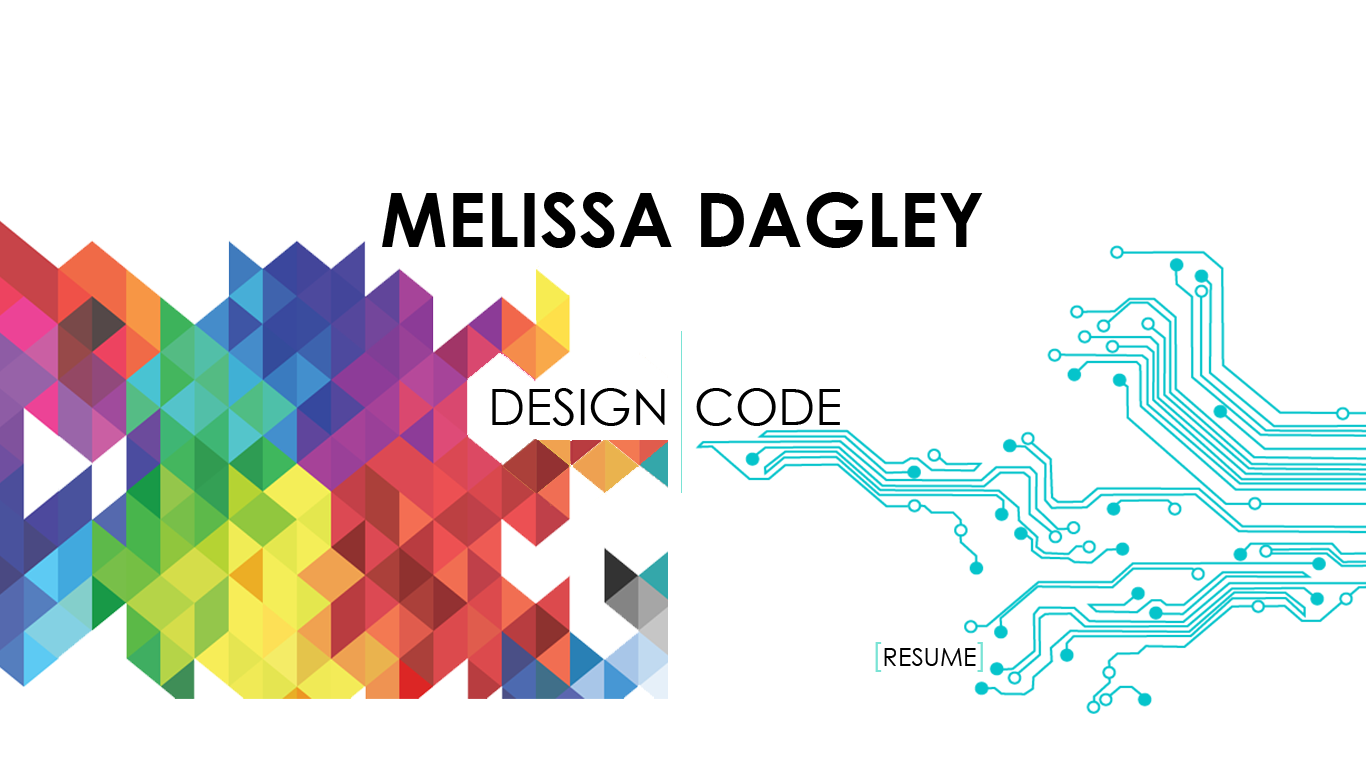
<style>
.page{position:relative;width:1366px;height:768px;background:#ffffff}
.page>*{position:absolute;margin:0}
.t1{font:75px "CenturyGothic-Bold";color:#000000}
.t2{font:50px "CenturyGothic";color:#000000}
.t3{font:25px "CenturyGothic";color:#000000}
.t4{font:33.3px "CenturyGothic";color:#7ae3d5}
</style>
<div class="page">
<p class="t1" style="left:382px;top:192px;width:601px;height:56px">MELISSA DAGLEY</p>
<p class="t2" style="left:492px;top:388px;width:173px;height:38px">DESIGN</p>
<p class="t2" style="left:696px;top:388px;width:144px;height:38px">CODE</p>
<p class="t3" style="left:875px;top:642px;width:108px;height:30px"><span class="t4">[</span>RESUME<span class="t4">]</span></p>
</div>
